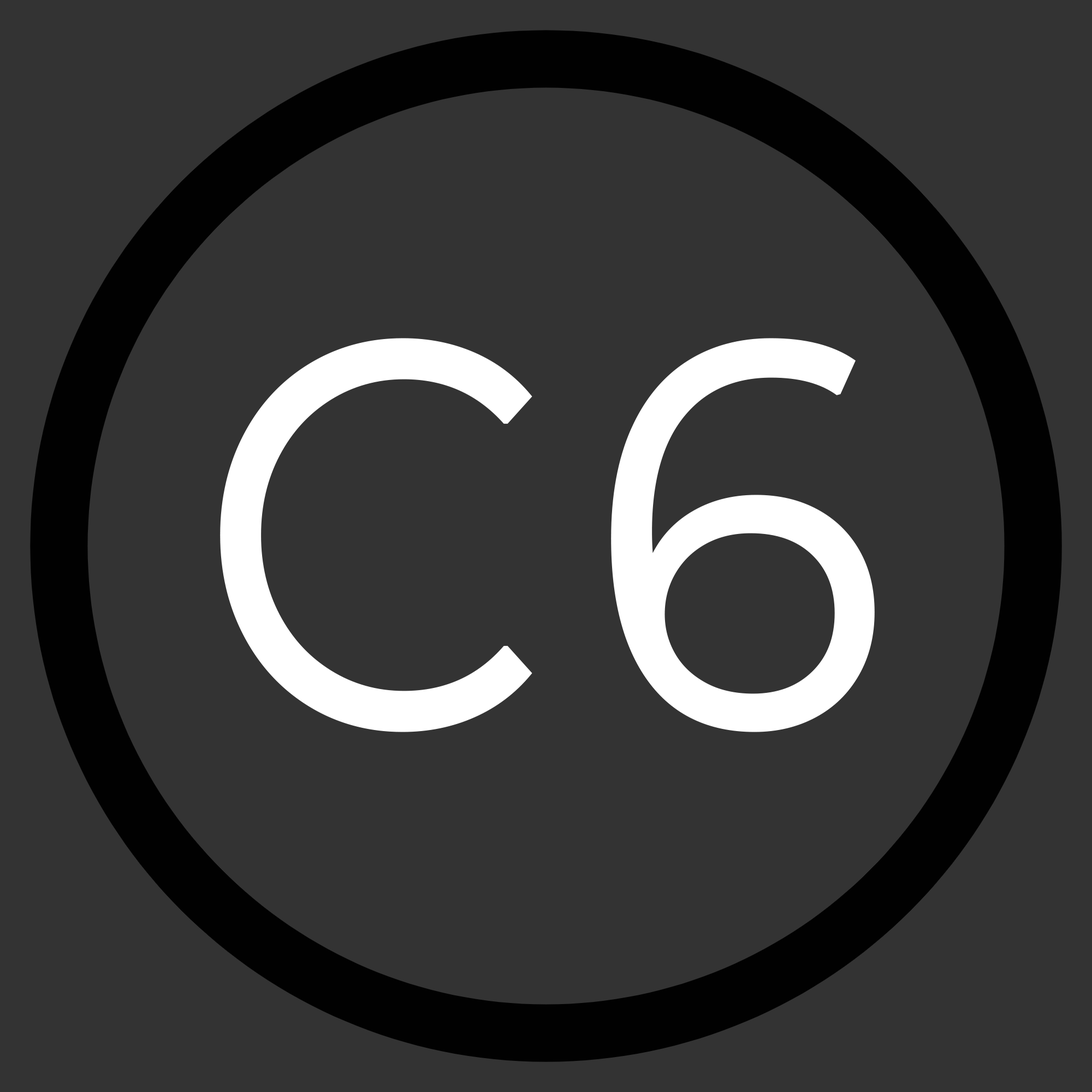
<style>
.page{position:relative;width:1092px;height:1092px;background:#333333}
.page>*{position:absolute;margin:0}
.t1{font:546px "Montserrat-Regular";letter-spacing:0.05em;color:#ffffff;font-weight:bold;scale:0.9 1}
</style>
<div class="page">
<p class="t1" style="left:220px;top:338px;width:655px;height:394px">C6</p>
</div>
